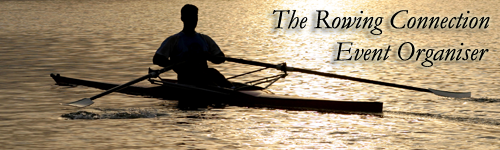
<style>
.page{position:relative;width:500px;height:150px}
.page>*{position:absolute;margin:0}
.t1{font:27.5px "Garamond-Italic";color:#000000}
</style>
<div class="page">
<p class="t1" style="left:272px;top:10px;width:218px;height:25px">The Rowing Connection</p>
<p class="t1" style="left:333px;top:42px;width:156px;height:25px">Event Organiser</p>
</div>
